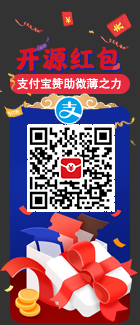
<style>
.page{position:relative;width:140px;height:325px;background:#333333}
.page>*{position:absolute;margin:0}
.t1{font:26.9px "HYTangMeiRenW";color:#dc151d}
.t2{font:26.9px "HYTangMeiRenW"}
.t3{font:11.6px "AdobeHeitiStd-Regular";color:#ffffff}
</style>
<div class="page">
<p class="t1" style="left:16px;top:46px;width:104px;height:25px">开源红包</p>
<p class="t2" style="left:18px;top:48px;width:104px;height:25px">开源红包</p>
<p class="t3" style="left:17px;top:77px;width:104px;height:13px">支付宝赞助微薄之力</p>
</div>
